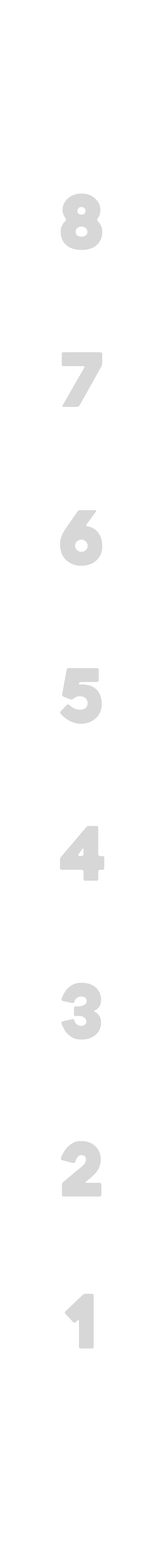
<style>
.page{position:relative;width:165px;height:1568px;background:#ffffff}
.page>*{position:absolute;margin:0}
.t1{font:74.7px "Heavitas";color:#d7d7d7}
</style>
<div class="page">
<p class="t1" style="left:61px;top:193px;width:42px;height:57px">8</p>
<p class="t1" style="left:62px;top:352px;width:41px;height:55px">7</p>
<p class="t1" style="left:60px;top:510px;width:43px;height:56px">6</p>
<p class="t1" style="left:60px;top:668px;width:42px;height:56px">5</p>
<p class="t1" style="left:60px;top:826px;width:45px;height:55px">4</p>
<p class="t1" style="left:61px;top:983px;width:41px;height:57px">3</p>
<p class="t1" style="left:61px;top:1141px;width:41px;height:56px">2</p>
<p class="t1" style="left:65px;top:1294px;width:29px;height:54px">1</p>
</div>
